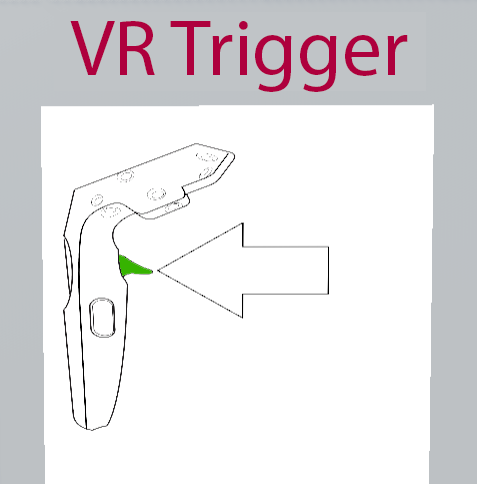
<style>
.page{position:relative;width:477px;height:484px;background:#ffffff}
.page>*{position:absolute;margin:0}
.t1{font:80px "MyriadPro-Regular";color:#ae003d}
</style>
<div class="page">
<p class="t1" style="left:70px;top:21px;width:338px;height:71px">VR Trigger</p>
</div>
